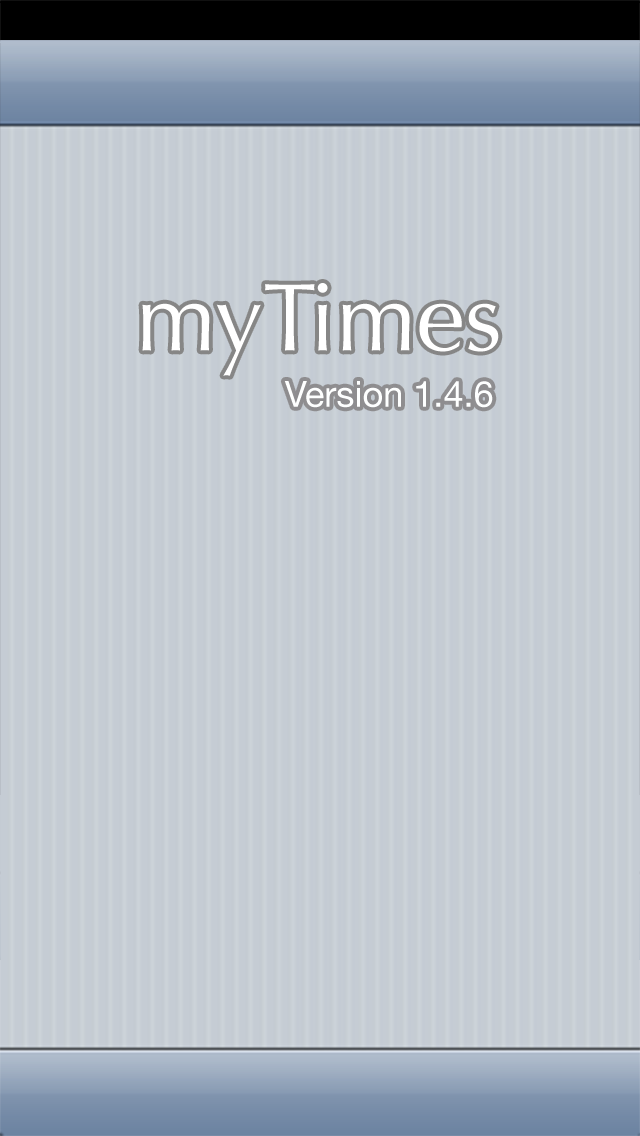
<style>
.page{position:relative;width:640px;height:1136px;background:#c5ccd4}
.page>*{position:absolute;margin:0}
.t1{font:96.2px "Optima-Regular";color:#ffffff}
.t2{font:36.1px "HelveticaNeue";color:#feffff}
</style>
<div class="page">
<p class="t1" style="left:142px;top:283px;width:357px;height:93px">myTimes</p>
<p class="t2" style="left:284px;top:381px;width:209px;height:27px">Version 1.4.6</p>
</div>
